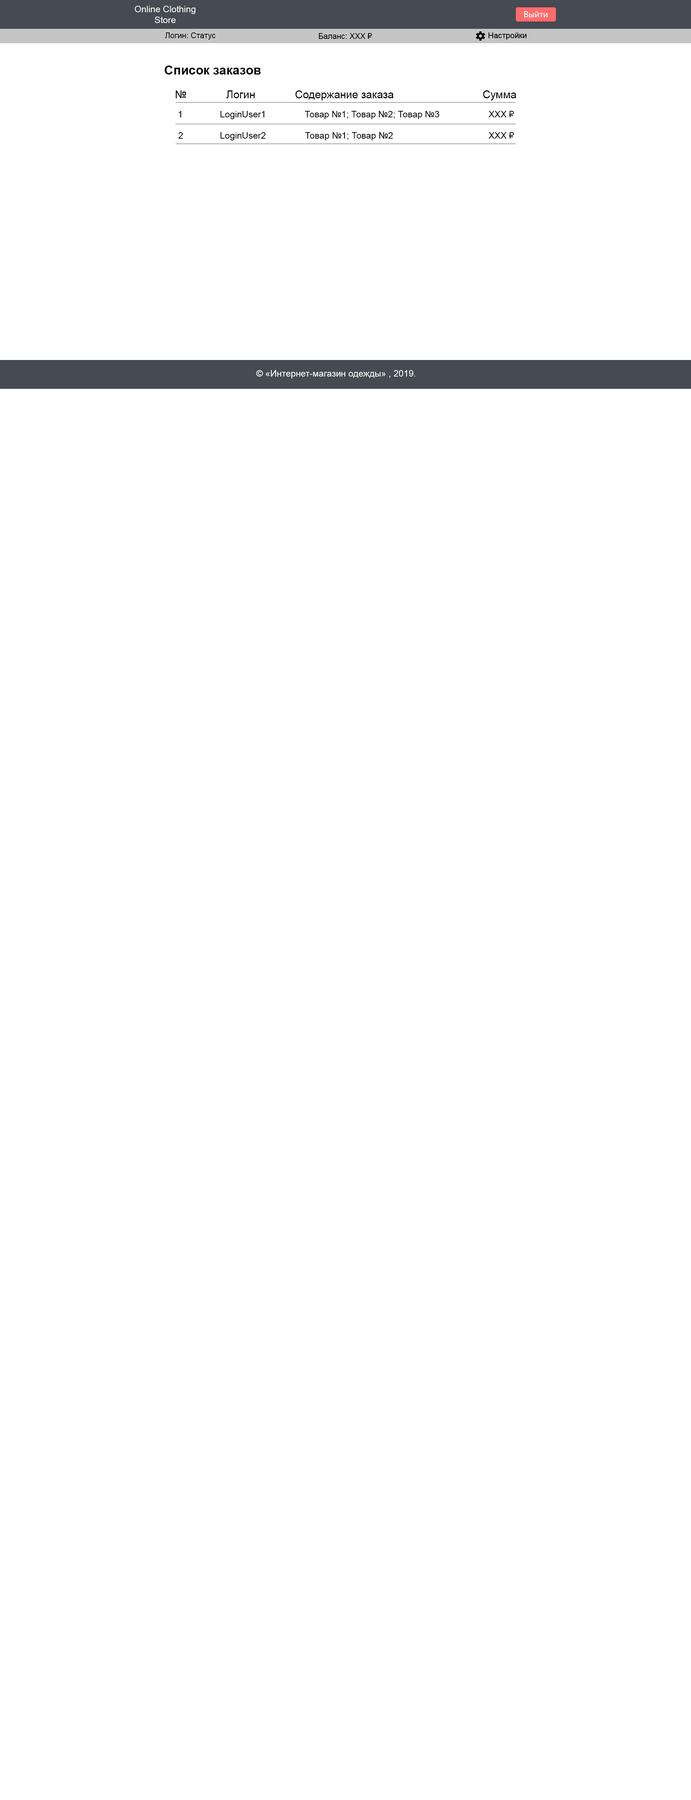
<style>
.page{position:relative;width:691px;height:1800px;background:#ffffff}
.page>*{position:absolute;margin:0}
.t1{font:9px "ArialMT";color:#ffffff}
.t2{font:7.9px "ArialMT";color:#000000}
.t3{font:12.6px "Arial-BoldMT";color:#000000}
.t4{font:10.8px "ArialMT";color:#000000}
.t5{font:9px "ArialMT";color:#000000}
</style>
<div class="page">
<p class="t1" style="left:135px;top:6px;width:60px;height:17px;text-align:center">Online Clothing<br>Store</p>
<p class="t2" style="left:165px;top:32px;width:51px;height:8px">Логин: Статус</p>
<p class="t2" style="left:319px;top:33px;width:53px;height:6px">Баланс: XXX ₽</p>
<p class="t3" style="left:165px;top:66px;width:96px;height:9px">Список заказов</p>
<p class="t4" style="left:176px;top:90px;width:10px;height:8px">№</p>
<p class="t4" style="left:226px;top:90px;width:29px;height:8px">Логин</p>
<p class="t4" style="left:296px;top:90px;width:97px;height:10px">Содержание заказа</p>
<p class="t4" style="left:483px;top:90px;width:33px;height:10px">Сумма</p>
<p class="t5" style="left:179px;top:111px;width:2px;height:6px">1</p>
<p class="t5" style="left:220px;top:111px;width:45px;height:8px">LoginUser1</p>
<p class="t5" style="left:305px;top:111px;width:135px;height:8px">Товар №1; Товар №2; Товар №3</p>
<p class="t5" style="left:489px;top:111px;width:25px;height:6px">XXX ₽</p>
<p class="t5" style="left:178px;top:132px;width:5px;height:7px">2</p>
<p class="t5" style="left:220px;top:132px;width:46px;height:8px">LoginUser2</p>
<p class="t5" style="left:305px;top:132px;width:88px;height:8px">Товар №1; Товар №2</p>
<p class="t5" style="left:489px;top:132px;width:25px;height:7px">XXX ₽</p>
<p class="t1" style="left:256px;top:370px;width:159px;height:8px">© «Интернет-магазин одежды» , 2019.</p>
</div>
